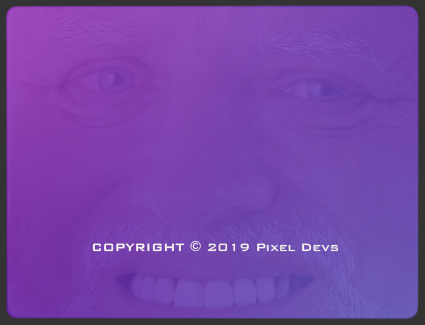
<style>
.page{position:relative;width:425px;height:325px}
.page>*{position:absolute;margin:0}
.t1{font:14px "BankGothicBold";color:#ffffff}
</style>
<div class="page">
<p class="t1" style="left:92px;top:240px;width:246px;height:12px">COPYRIGHT © 2019 Pixel Devs</p>
</div>
